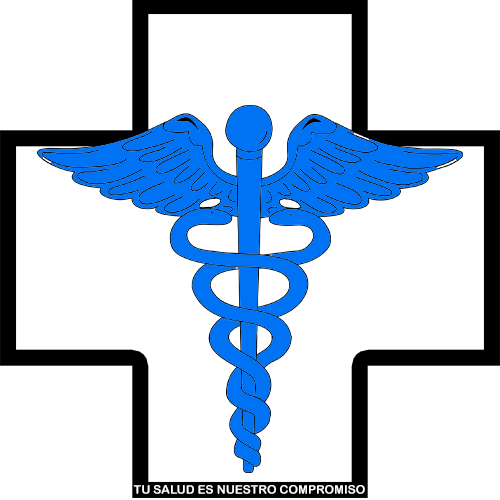
<style>
.page{position:relative;width:500px;height:500px;background:#ffffff}
.page>*{position:absolute;margin:0}
.t1{font:12px "ArialRoundedMTBold";color:#ffffff}
</style>
<div class="page">
<p class="t1" style="left:133px;top:485px;width:232px;height:9px">TU SALUD ES NUESTRO COMPROMISO</p>
</div>
